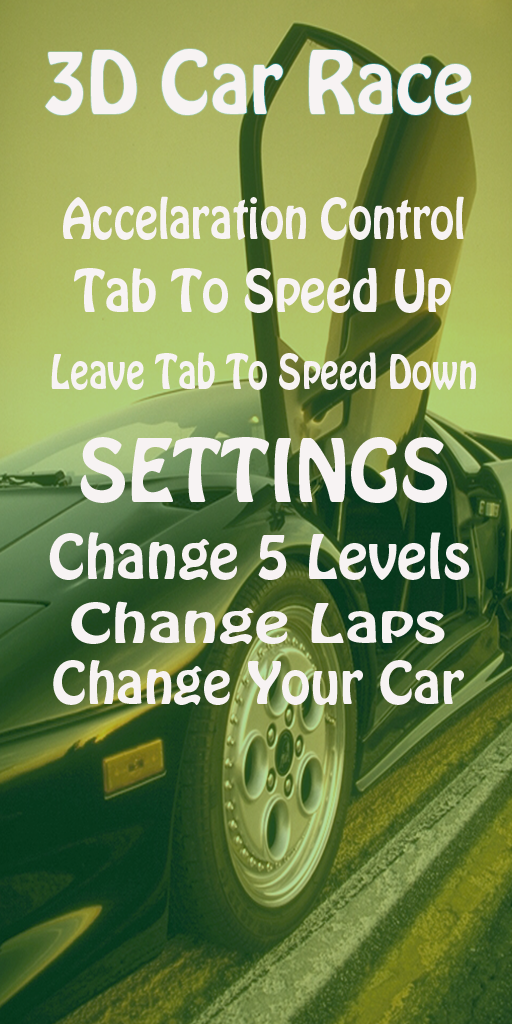
<style>
.page{position:relative;width:512px;height:1024px}
.page>*{position:absolute;margin:0}
.t1{font:76.8px "HoboStd";color:#f7f3f3}
.t2{font:49.4px "HoboStd";color:#f7f3f3;scale:0.88 1}
.t3{font:51.1px "HoboStd";color:#f7f3f3;scale:0.96 1}
.t4{font:42.5px "HoboStd";color:#f7f3f3;scale:0.84 1}
.t5{font:54.5px "HoboStd";color:#f7f3f3;scale:1.05 1}
.t6{font:47.7px "HoboStd";color:#f7f3f3;scale:1.38 1}
.t7{font:51.1px "HoboStd";color:#f7f3f3;scale:1.05 1}
</style>
<div class="page">
<p class="t1" style="left:45px;top:49px;width:426px;height:66px">3D Car Race</p>
<p class="t2" style="left:63px;top:196px;width:401px;height:44px">Accelaration Control</p>
<p class="t3" style="left:74px;top:268px;width:377px;height:45px">Tab To Speed Up</p>
<p class="t4" style="left:51px;top:352px;width:425px;height:38px">Leave Tab To Speed Down</p>
<p class="t1" style="left:80px;top:437px;width:367px;height:66px">SETTINGS</p>
<p class="t5" style="left:49px;top:532px;width:421px;height:48px">Change 5 Levels</p>
<p class="t6" style="left:71px;top:601px;width:374px;height:43px">Change Laps</p>
<p class="t7" style="left:53px;top:660px;width:411px;height:45px">Change Your Car</p>
</div>
